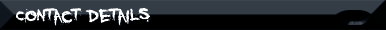
<style>
.page{position:relative;width:386px;height:30px;background:#000001}
.page>*{position:absolute;margin:0}
.t1{font:25.2px "YouMurdererBB";color:#ffffff;scale:1.16 1}
</style>
<div class="page">
<p class="t1" style="left:13px;top:7px;width:138px;height:19px">Contact Details</p>
</div>
